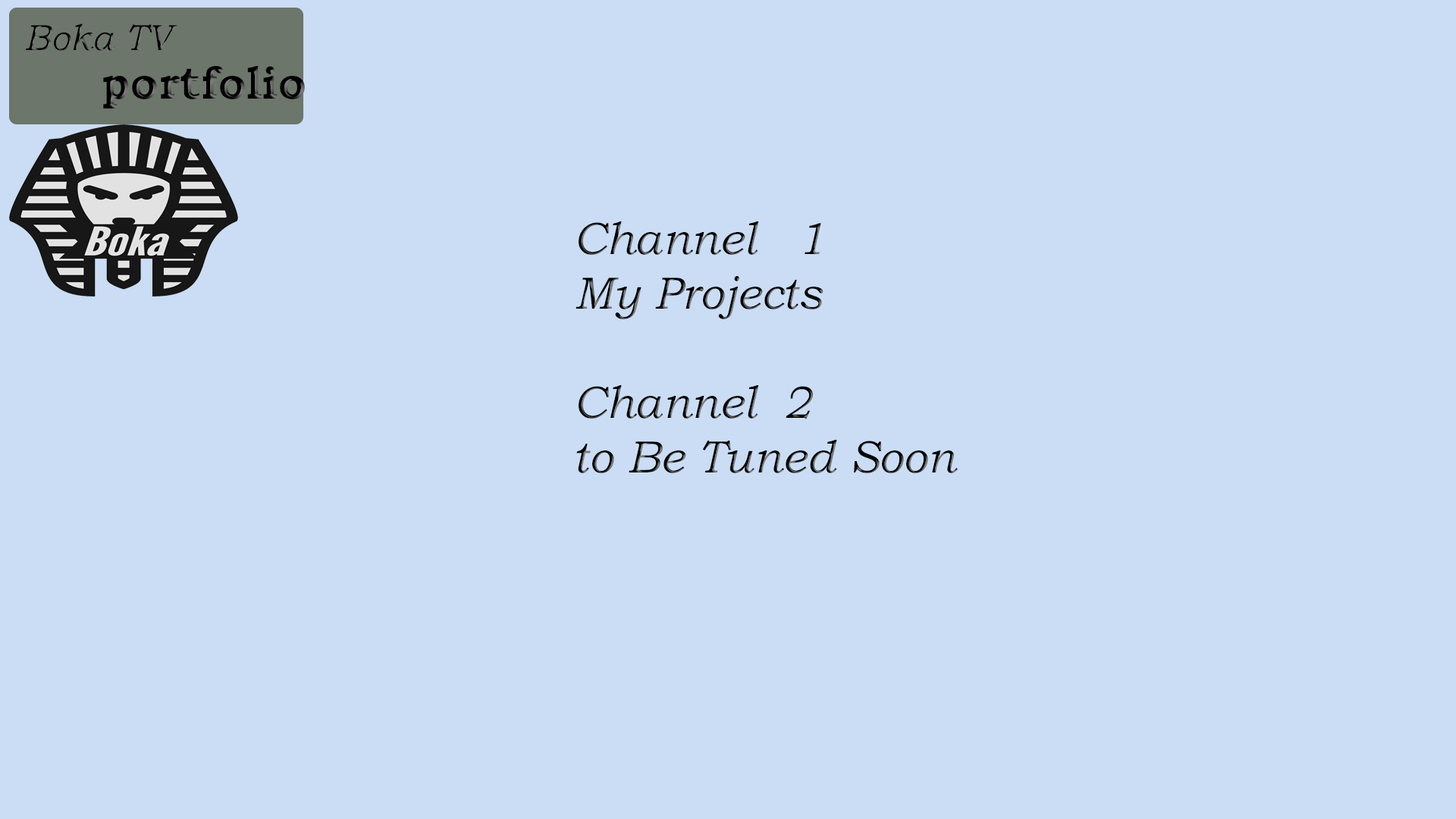
<style>
.page{position:relative;width:1456px;height:819px;background:#caddf5}
.page>*{position:absolute;margin:0}
.t1{font:36.4px "BookmanOldStyle-Italic"}
.t2{font:45.5px "BookmanOldStyle-Bold"}
.t3{font:45.5px "BookmanOldStyle-Italic"}
</style>
<div class="page">
<p class="t1" style="left:25px;top:24px;width:152px;height:27px">Boka TV</p>
<p class="t2" style="left:103px;top:66px;width:202px;height:42px">portfolio</p>
<p class="t3" style="left:576px;top:221px;width:382px;height:252px">Channel   1       <br>My Projects<br><br>Channel  2<br>to Be Tuned Soon</p>
</div>
